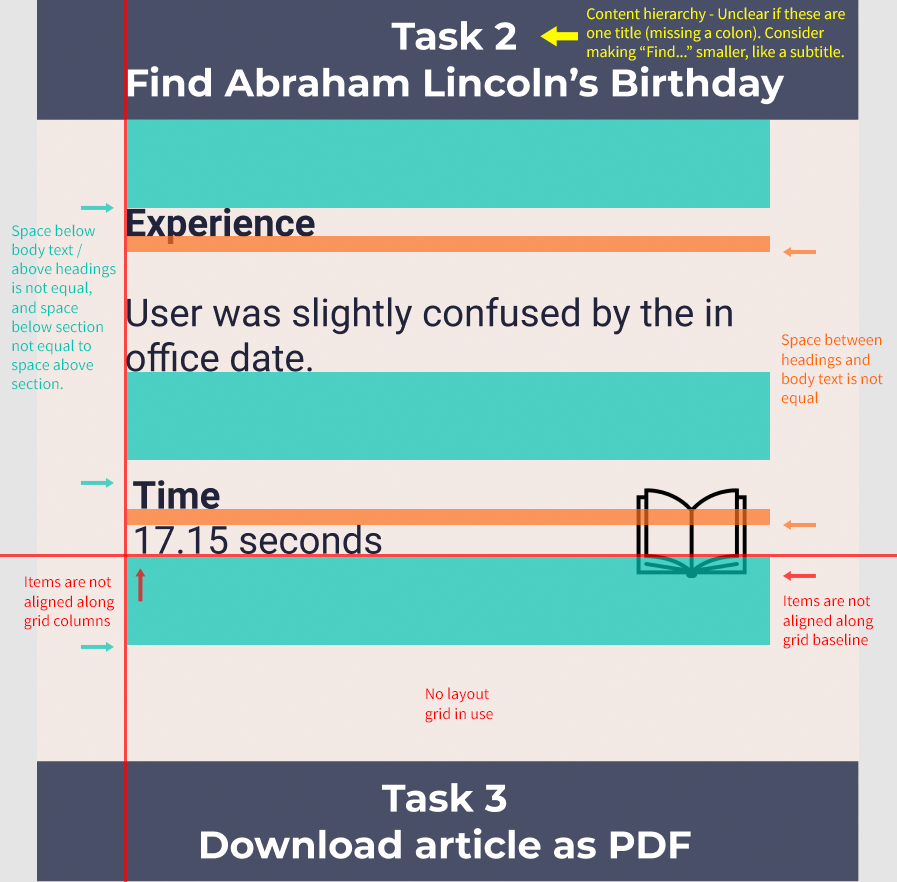
<style>
.page{position:relative;width:897px;height:882px}
.page>*{position:absolute;margin:0}
.t1{font:16px "SourceSansPro-Regular";color:#fffc00}
.t2{font:16px "SourceSansPro-Regular";color:#03c5b5}
.t3{font:16px "SourceSansPro-Regular";color:#ff6600}
.t4{font:16px "SourceSansPro-Regular";color:#ff0000}
</style>
<div class="page">
<p class="t1" style="left:587px;top:7px;width:258px;height:54px">Content hierarchy - Unclear if these are one title (missing a colon). Consider making “Find...” smaller, like a subtitle.</p>
<p class="t2" style="left:11px;top:224px;width:105px;height:166px">Space below body text / above headings is not equal, and space below section not equal to space above section.</p>
<p class="t3" style="left:781px;top:333px;width:102px;height:74px">Space between headings and body text is not equal</p>
<p class="t4" style="left:24px;top:576px;width:90px;height:54px">Items are not aligned along grid columns</p>
<p class="t4" style="left:783px;top:595px;width:90px;height:54px">Items are not aligned along grid baseline</p>
<p class="t4" style="left:425px;top:687px;width:68px;height:36px">No layout grid in use</p>
</div>
